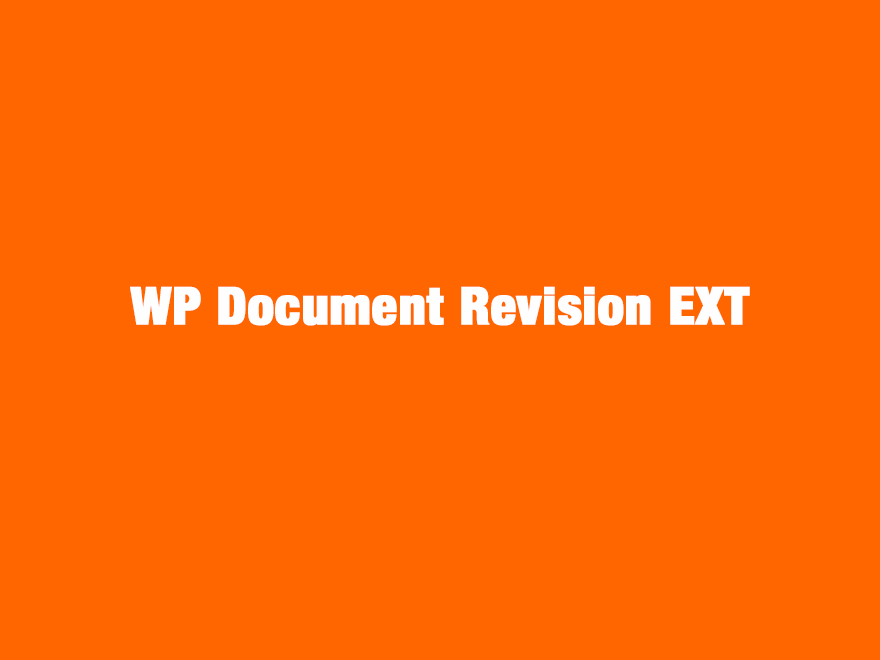
<style>
.page{position:relative;width:880px;height:660px;background:#ff6600}
.page>*{position:absolute;margin:0}
.t1{font:52px "HelveticaNeueLTStd-BlkCn";color:#fffefe;font-weight:bold}
</style>
<div class="page">
<p class="t1" style="left:130px;top:286px;width:620px;height:40px">WP Document Revision EXT</p>
</div>
